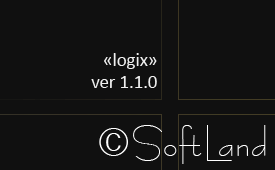
<style>
.page{position:relative;width:275px;height:170px;background:#101010}
.page>*{position:absolute;margin:0}
.t1{font:18.7px "Calibri";color:#f0f0f0}
.t2{font:40px "BernhardFashionBT-Regular";color:#ffffff}
</style>
<div class="page">
<p class="t1" style="left:91px;top:53px;width:66px;height:35px;text-align:right">«logix»<br>ver 1.1.0</p>
<p class="t2" style="left:99px;top:125px;width:167px;height:39px">©SoftLand</p>
</div>
